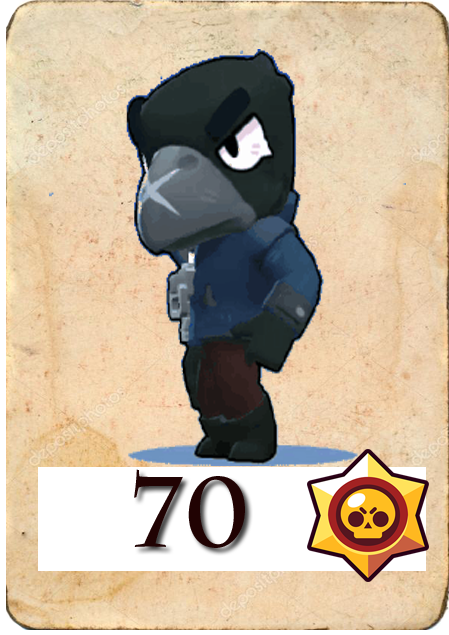
<style>
.page{position:relative;width:449px;height:635px}
.page>*{position:absolute;margin:0}
.t1{font:100px "CharlemagneStd-Bold";color:#210303}
</style>
<div class="page">
<p class="t1" style="left:134px;top:469px;width:111px;height:79px">70</p>
</div>
